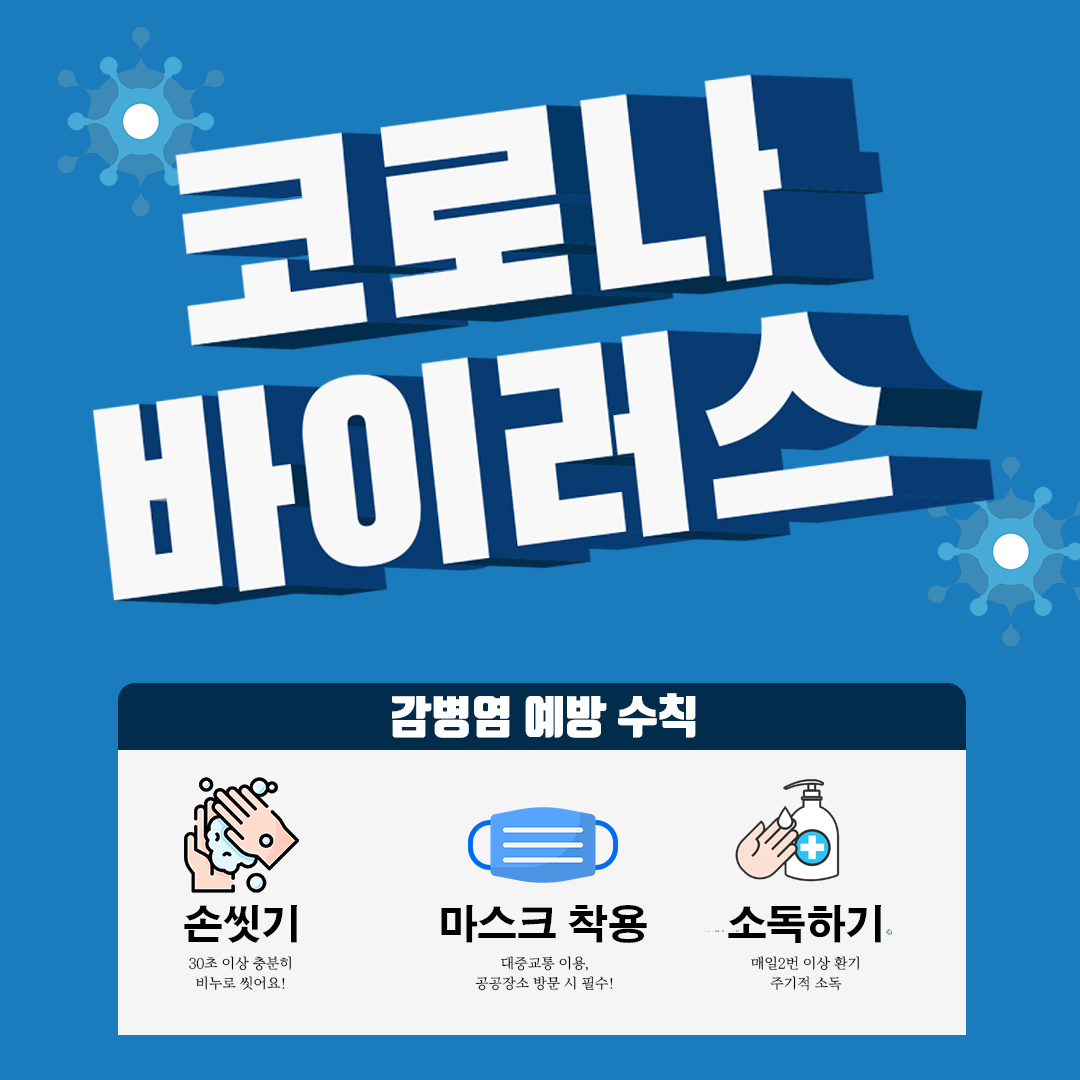
<style>
.page{position:relative;width:1080px;height:1080px;background:#1a7cbd}
.page>*{position:absolute;margin:0}
.t1{font:45px "TmonMonsoriBlack";color:#ffffff}
.t2{font:40px "H2gtrE";letter-spacing:-0.02em;color:#000000}
.t3{font:15px/20px "JejuMyeongjo";letter-spacing:-0.02em;color:#000000}
</style>
<div class="page">
<p class="t1" style="left:392px;top:693px;width:304px;height:45px">감병염 예방 수칙</p>
<p class="t2" style="left:184px;top:905px;width:114px;height:38px">손씻기</p>
<p class="t2" style="left:441px;top:905px;width:206px;height:38px">마스크 착용</p>
<p class="t2" style="left:728px;top:905px;width:154px;height:38px">소독하기</p>
<p class="t3" style="left:189px;top:956px;width:102px;height:34px;text-align:center">30초 이상 충분히<br>비누로 씻어요!</p>
<p class="t3" style="left:475px;top:956px;width:138px;height:35px;text-align:center">대중교통 이용,<br>공공장소 방문 시 필수!</p>
<p class="t3" style="left:751px;top:956px;width:108px;height:35px;text-align:center">매일2번 이상 환기<br>주기적 소독</p>
</div>
